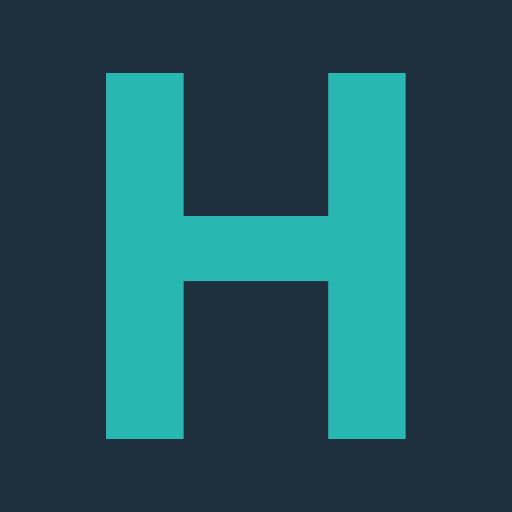
<style>
.page{position:relative;width:512px;height:512px;background:#1e303d}
.page>*{position:absolute;margin:0}
.t1{font:512px "OpenSans-Bold";letter-spacing:0.005em;color:#28b7b1}
</style>
<div class="page">
<p class="t1" style="left:106px;top:73px;width:300px;height:366px">H</p>
</div>
